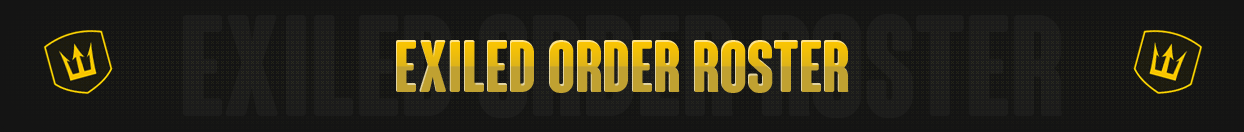
<style>
.page{position:relative;width:1244px;height:132px;background:#141414}
.page>*{position:absolute;margin:0}
.t1{font:72px "ColunaRounded-CondensedBold"}
</style>
<div class="page">
<p class="t1" style="left:396px;top:40px;width:453px;height:53px">EXILED ORDER ROSTER</p>
</div>
